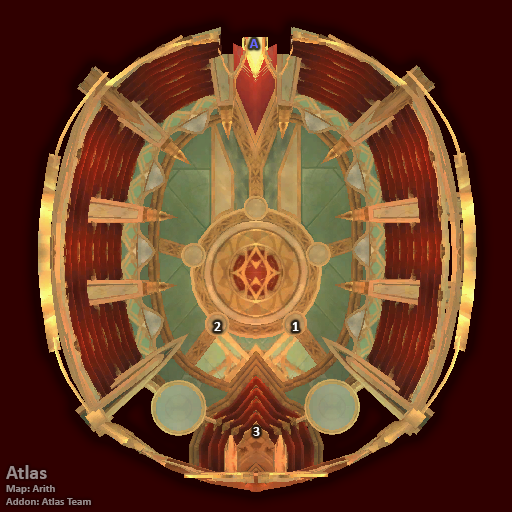
<style>
.page{position:relative;width:512px;height:512px;background:#300000}
.page>*{position:absolute;margin:0}
.t1{font:14px "Calibri-Bold";color:#6666ff}
.t2{font:14px "Calibri-Bold";color:#ffffff}
.t3{font:11px "Calibri-Bold";color:#998d8d}
.t4{font:20px "Calibri-Bold";color:#998d8d}
</style>
<div class="page">
<p class="t1" style="left:249px;top:39px;width:9px;height:9px">A</p>
<p class="t2" style="left:214px;top:322px;width:7px;height:9px">2</p>
<p class="t2" style="left:292px;top:322px;width:7px;height:9px">1</p>
<p class="t2" style="left:253px;top:427px;width:7px;height:9px">3</p>
<p class="t3" style="left:6px;top:465px;width:85px;height:40px"><span class="t4">Atlas<br></span>Map: Arith<br>Addon: Atlas Team</p>
</div>
